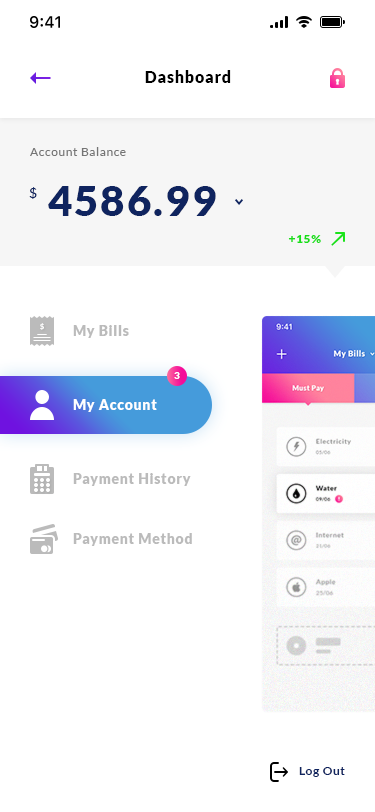
<style>
.page{position:relative;width:375px;height:812px;background:#ffffff}
.page>*{position:absolute;margin:0}
.t1{font:16px "Lato-Black";letter-spacing:0.05em;color:#000000}
.t2{font:12px "Lato-Regular";letter-spacing:0.05em;color:#757575}
.t3{font:42px "Lato-Black";letter-spacing:0.05em;color:#0f245f}
.t4{font:14px "Lato-Regular";letter-spacing:0.05em;color:#0f245f}
.t5{font:12px "Lato-Black";letter-spacing:0.05em;color:#18df18}
.t6{font:14px "Lato-Black";letter-spacing:0.05em;color:#bbbbbb}
.t7{font:10px "Lato-Black";letter-spacing:0.05em;color:#ffffff}
.t8{font:14px "Lato-Black";letter-spacing:0.05em;color:#ffffff}
.t9{font:12px "Lato-Bold";letter-spacing:0.05em;color:#0f245f}
</style>
<div class="page">
<p class="t1" style="left:145px;top:70px;width:86px;height:13px">Dashboard</p>
<p class="t2" style="left:30px;top:147px;width:96px;height:9px">Account Balance</p>
<p class="t3" style="left:29px;top:186px;width:187px;height:30px"><span class="t4">$ </span>4586.99</p>
<p class="t5" style="left:288px;top:235px;width:33px;height:8px">+15%</p>
<p class="t6" style="left:73px;top:325px;width:56px;height:13px">My Bills</p>
<p class="t7" style="left:174px;top:372px;width:6px;height:7px">3</p>
<p class="t8" style="left:73px;top:399px;width:84px;height:13px">My Account</p>
<p class="t6" style="left:73px;top:473px;width:118px;height:13px">Payment History</p>
<p class="t6" style="left:73px;top:533px;width:119px;height:13px">Payment Method</p>
<p class="t9" style="left:299px;top:767px;width:46px;height:10px">Log Out</p>
</div>
